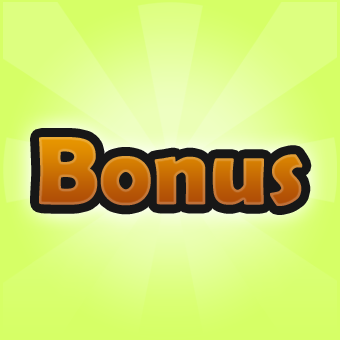
<style>
.page{position:relative;width:340px;height:340px}
.page>*{position:absolute;margin:0}
.t1{font:96px "BerlinSansFBDemi-Bold";font-weight:bold}
</style>
<div class="page">
<p class="t1" style="left:0px;top:114px;width:340px;height:92px">Bonus</p>
</div>
